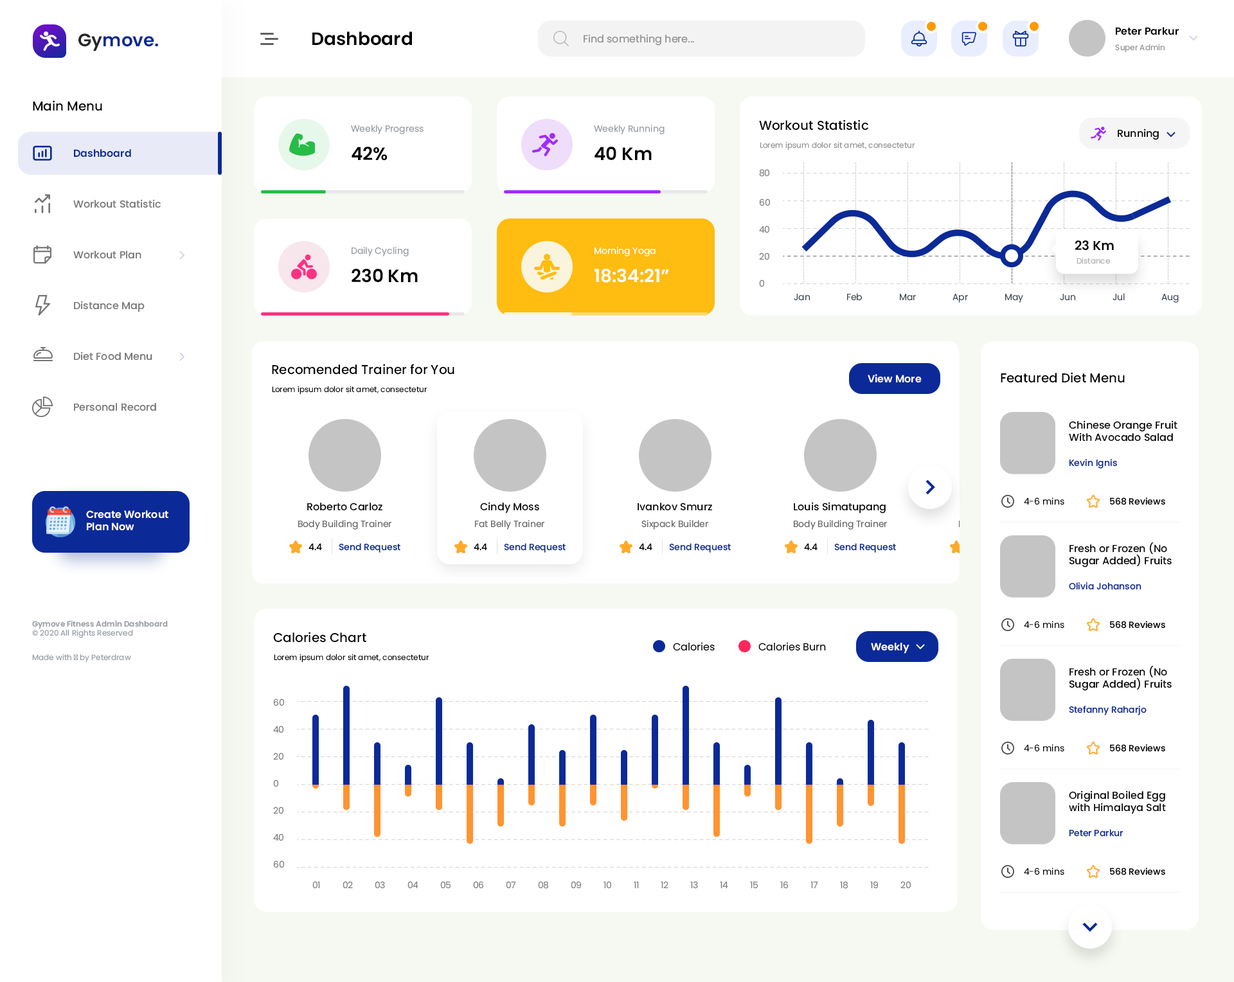
<style>
.page{position:relative;width:1234px;height:982px;background:#ffffff}
.page>*{position:absolute;margin:0}
.t1{font:10.3px "Poppins-SemiBold";color:#000000}
.t2{font:18px "Poppins-SemiBold";color:#0b2a97}
.t3{font:18px "Poppins-SemiBold";color:#262626}
.t4{font:18px "Poppins-SemiBold";color:#000000}
.t5{font:10.3px "Poppins-Regular";color:#8d8d8d}
.t6{font:7.7px "Poppins-Regular";color:#8f8f8f}
.t7{font:12.9px "Poppins-Medium";color:#000000}
.t8{font:9px "Poppins-Regular";color:#969ba0}
.t9{font:10.3px "Poppins-Medium";color:#000000}
.t10{font:10.3px "Poppins-SemiBold";color:#0b2a97}
.t11{font:7.7px "Poppins-Regular";color:#929292}
.t12{font:9px "Poppins-Regular";color:#808080}
.t13{font:10.3px "Poppins-Medium";color:#757575}
.t14{font:12.9px "Poppins-SemiBold";color:#000000}
.t15{font:9px "Poppins-Regular";color:#ffffff}
.t16{font:7.7px "Poppins-Regular";color:#afafaf}
.t17{font:18px "Poppins-SemiBold";color:#ffffff}
.t18{font:9px "Poppins-Regular";color:#3e4954}
.t19{font:10.3px "Poppins-SemiBold";color:#ffffff}
.t20{font:7.7px "Poppins-Regular";color:#000000}
.t21{font:9px "Poppins-Medium";color:#0b2a97}
.t22{font:9px "Poppins-Regular";color:#000000}
.t23{font:9px "Poppins-Medium";color:#000000}
.t24{font:9px "Poppins-Regular";color:#626262}
.t25{font:7.7px "Poppins-SemiBold";color:#969ba0}
.t26{font:7.7px "Poppins-Regular";color:#969ba0}
.t27{font:10.3px "Poppins-Regular";color:#000000}
</style>
<div class="page">
<p class="t1" style="left:1116px;top:27px;width:63px;height:8px">Peter Parkur</p>
<p class="t2" style="left:78px;top:33px;width:80px;height:18px"><span class="t3">Gy</span>move.</p>
<p class="t4" style="left:312px;top:32px;width:100px;height:14px">Dashboard</p>
<p class="t5" style="left:584px;top:34px;width:110px;height:12px">Find something here...</p>
<p class="t6" style="left:1115px;top:44px;width:50px;height:9px">Super Admin</p>
<p class="t7" style="left:33px;top:100px;width:69px;height:11px">Main Menu</p>
<p class="t8" style="left:351px;top:125px;width:73px;height:9px">Weekly Progress</p>
<p class="t8" style="left:594px;top:125px;width:71px;height:9px">Weekly Running</p>
<p class="t7" style="left:759px;top:120px;width:110px;height:10px">Workout Statistic</p>
<p class="t9" style="left:1118px;top:129px;width:41px;height:11px">Running</p>
<p class="t10" style="left:74px;top:149px;width:57px;height:9px">Dashboard</p>
<p class="t4" style="left:352px;top:147px;width:36px;height:14px">42%</p>
<p class="t4" style="left:595px;top:147px;width:57px;height:13px">40 Km</p>
<p class="t11" style="left:760px;top:141px;width:155px;height:9px">Lorem ipsum dolor sit amet, consectetur</p>
<p class="t12" style="left:759px;top:169px;width:11px;height:8px">80</p>
<p class="t13" style="left:73px;top:199px;width:88px;height:9px">Workout Statistic</p>
<p class="t12" style="left:759px;top:199px;width:11px;height:7px">60</p>
<p class="t12" style="left:759px;top:226px;width:11px;height:7px">40</p>
<p class="t14" style="left:1076px;top:240px;width:38px;height:10px">23 Km</p>
<p class="t13" style="left:73px;top:251px;width:68px;height:8px">Workout Plan</p>
<p class="t8" style="left:352px;top:247px;width:57px;height:9px">Daily Cycling</p>
<p class="t15" style="left:595px;top:247px;width:61px;height:9px">Morning Yoga</p>
<p class="t12" style="left:759px;top:253px;width:11px;height:7px">20</p>
<p class="t16" style="left:1077px;top:257px;width:33px;height:7px">Distance</p>
<p class="t4" style="left:352px;top:269px;width:66px;height:14px">230 Km</p>
<p class="t17" style="left:595px;top:269px;width:74px;height:14px">18:34:21”</p>
<p class="t12" style="left:759px;top:280px;width:5px;height:7px">0</p>
<p class="t18" style="left:794px;top:294px;width:17px;height:7px">Jan</p>
<p class="t18" style="left:847px;top:293px;width:15px;height:8px">Feb</p>
<p class="t18" style="left:900px;top:294px;width:16px;height:7px">Mar</p>
<p class="t18" style="left:953px;top:294px;width:15px;height:9px">Apr</p>
<p class="t18" style="left:1005px;top:294px;width:18px;height:9px">May</p>
<p class="t18" style="left:1060px;top:294px;width:16px;height:7px">Jun</p>
<p class="t18" style="left:1113px;top:293px;width:12px;height:8px">Jul</p>
<p class="t18" style="left:1162px;top:294px;width:17px;height:9px">Aug</p>
<p class="t13" style="left:74px;top:301px;width:71px;height:11px">Distance Map</p>
<p class="t13" style="left:74px;top:352px;width:78px;height:9px">Diet Food Menu</p>
<p class="t7" style="left:272px;top:364px;width:183px;height:11px">Recomended Trainer for You</p>
<p class="t19" style="left:868px;top:374px;width:54px;height:9px">View More</p>
<p class="t7" style="left:1001px;top:372px;width:124px;height:11px">Featured Diet Menu</p>
<p class="t20" style="left:272px;top:386px;width:156px;height:9px">Lorem ipsum dolor sit amet, consectetur</p>
<p class="t13" style="left:74px;top:403px;width:82px;height:8px">Personal Record</p>
<p class="t9" style="left:1069px;top:420px;width:109px;height:22px">Chinese Orange Fruit With Avocado Salad</p>
<p class="t21" style="left:1069px;top:459px;width:48px;height:10px">Kevin Ignis</p>
<p class="t22" style="left:1024px;top:498px;width:41px;height:7px">4-6 mins</p>
<p class="t23" style="left:1110px;top:498px;width:56px;height:7px">568 Reviews</p>
<p class="t9" style="left:307px;top:503px;width:75px;height:8px">Roberto Carloz</p>
<p class="t9" style="left:480px;top:502px;width:59px;height:12px">Cindy Moss</p>
<p class="t9" style="left:638px;top:503px;width:74px;height:8px">Ivankov Smurz</p>
<p class="t9" style="left:794px;top:502px;width:92px;height:12px">Louis Simatupang</p>
<p class="t19" style="left:86px;top:510px;width:82px;height:21px">Create Workout Plan Now</p>
<p class="t24" style="left:298px;top:520px;width:94px;height:10px">Body Building Trainer</p>
<p class="t24" style="left:475px;top:520px;width:69px;height:10px">Fat Belly Trainer</p>
<p class="t24" style="left:642px;top:520px;width:66px;height:10px">Sixpack Builder</p>
<p class="t24" style="left:794px;top:520px;width:93px;height:10px">Body Building Trainer</p>
<p class="t23" style="left:309px;top:543px;width:13px;height:8px">4.4</p>
<p class="t21" style="left:339px;top:543px;width:62px;height:10px">Send Request</p>
<p class="t23" style="left:474px;top:543px;width:13px;height:8px">4.4</p>
<p class="t21" style="left:504px;top:543px;width:62px;height:10px">Send Request</p>
<p class="t23" style="left:639px;top:543px;width:13px;height:8px">4.4</p>
<p class="t21" style="left:669px;top:543px;width:62px;height:10px">Send Request</p>
<p class="t23" style="left:804px;top:543px;width:14px;height:8px">4.4</p>
<p class="t21" style="left:834px;top:543px;width:62px;height:10px">Send Request</p>
<p class="t9" style="left:1070px;top:543px;width:102px;height:25px">Fresh or Frozen (No Sugar Added) Fruits</p>
<p class="t21" style="left:1069px;top:582px;width:73px;height:8px">Olivia Johanson</p>
<p class="t25" style="left:32px;top:620px;width:136px;height:18px">Gymove Fitness Admin Dashboard<br><span class="t26">© 2020 All Rights Reserved</span></p>
<p class="t22" style="left:1024px;top:621px;width:41px;height:8px">4-6 mins</p>
<p class="t23" style="left:1110px;top:621px;width:56px;height:8px">568 Reviews</p>
<p class="t7" style="left:273px;top:632px;width:93px;height:11px">Calories Chart</p>
<p class="t26" style="left:32px;top:654px;width:99px;height:9px">Made with ♥ by Peterdraw</p>
<p class="t20" style="left:274px;top:654px;width:155px;height:9px">Lorem ipsum dolor sit amet, consectetur</p>
<p class="t27" style="left:673px;top:642px;width:42px;height:9px">Calories</p>
<p class="t27" style="left:759px;top:642px;width:67px;height:9px">Calories Burn</p>
<p class="t19" style="left:871px;top:643px;width:39px;height:11px">Weekly</p>
<p class="t9" style="left:1070px;top:666px;width:102px;height:25px">Fresh or Frozen (No Sugar Added) Fruits</p>
<p class="t12" style="left:273px;top:699px;width:11px;height:7px">60</p>
<p class="t21" style="left:1069px;top:706px;width:78px;height:10px">Stefanny Raharjo</p>
<p class="t12" style="left:273px;top:726px;width:11px;height:8px">40</p>
<p class="t22" style="left:1024px;top:744px;width:41px;height:8px">4-6 mins</p>
<p class="t23" style="left:1110px;top:744px;width:56px;height:8px">568 Reviews</p>
<p class="t12" style="left:273px;top:753px;width:11px;height:7px">20</p>
<p class="t12" style="left:273px;top:780px;width:5px;height:8px">0</p>
<p class="t9" style="left:1069px;top:791px;width:97px;height:24px">Original Boiled Egg with Himalaya Salt</p>
<p class="t12" style="left:273px;top:807px;width:11px;height:8px">20</p>
<p class="t12" style="left:273px;top:834px;width:11px;height:8px">40</p>
<p class="t21" style="left:1069px;top:829px;width:55px;height:8px">Peter Parkur</p>
<p class="t12" style="left:273px;top:861px;width:11px;height:8px">60</p>
<p class="t22" style="left:1024px;top:868px;width:41px;height:8px">4-6 mins</p>
<p class="t23" style="left:1110px;top:868px;width:56px;height:8px">568 Reviews</p>
<p class="t12" style="left:312px;top:881px;width:8px;height:8px">01</p>
<p class="t12" style="left:343px;top:881px;width:10px;height:8px">02</p>
<p class="t12" style="left:375px;top:881px;width:10px;height:8px">03</p>
<p class="t12" style="left:408px;top:881px;width:11px;height:8px">04</p>
<p class="t12" style="left:440px;top:881px;width:11px;height:8px">05</p>
<p class="t12" style="left:473px;top:881px;width:11px;height:8px">06</p>
<p class="t12" style="left:506px;top:881px;width:10px;height:8px">07</p>
<p class="t12" style="left:538px;top:881px;width:11px;height:8px">08</p>
<p class="t12" style="left:571px;top:881px;width:10px;height:8px">09</p>
<p class="t12" style="left:604px;top:881px;width:7px;height:8px">10</p>
<p class="t12" style="left:634px;top:881px;width:5px;height:8px">11</p>
<p class="t12" style="left:661px;top:881px;width:8px;height:8px">12</p>
<p class="t12" style="left:690px;top:881px;width:8px;height:8px">13</p>
<p class="t12" style="left:720px;top:881px;width:8px;height:8px">14</p>
<p class="t12" style="left:750px;top:881px;width:9px;height:8px">15</p>
<p class="t12" style="left:780px;top:881px;width:9px;height:8px">16</p>
<p class="t12" style="left:811px;top:881px;width:7px;height:8px">17</p>
<p class="t12" style="left:840px;top:881px;width:9px;height:8px">18</p>
<p class="t12" style="left:870px;top:881px;width:8px;height:8px">19</p>
<p class="t12" style="left:901px;top:881px;width:10px;height:8px">20</p>
</div>
